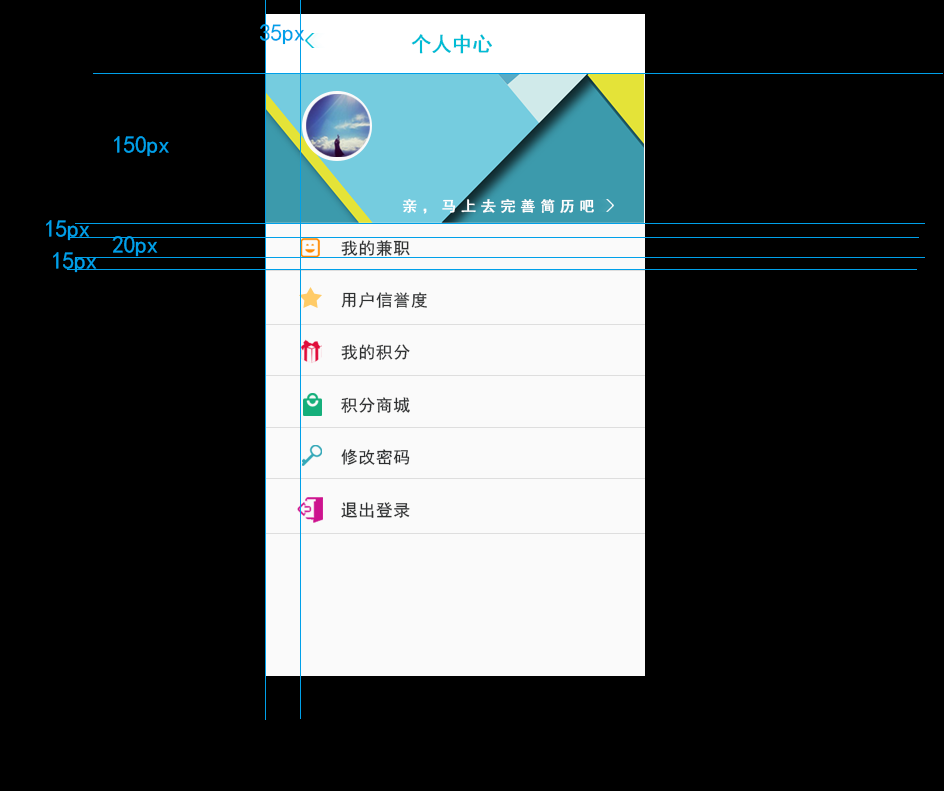
<style>
.page{position:relative;width:944px;height:791px;background:#000000}
.page>*{position:absolute;margin:0}
.t1{font:24px "SimHei";letter-spacing:-0.02em;color:#00a0e9}
.t2{font:20.2px "SimHei";letter-spacing:-0.02em;color:#00bcd4;font-weight:bold}
.t3{font:14.6px "SimHei";letter-spacing:0.32em;color:#ffffff;font-weight:bold}
.t4{font:16.9px "SimHei";letter-spacing:0.04em;color:#2e3031}
</style>
<div class="page">
<p class="t1" style="left:260px;top:24px;width:45px;height:21px">35px</p>
<p class="t2" style="left:411px;top:34px;width:81px;height:20px">个人中心</p>
<p class="t1" style="left:114px;top:136px;width:55px;height:21px">150px</p>
<p class="t3" style="left:402px;top:199px;width:192px;height:15px">亲，马上去完善简历吧</p>
<p class="t1" style="left:46px;top:220px;width:44px;height:21px">15px</p>
<p class="t1" style="left:112px;top:236px;width:46px;height:21px">20px</p>
<p class="t4" style="left:341px;top:240px;width:69px;height:16px">我的兼职</p>
<p class="t1" style="left:53px;top:252px;width:44px;height:21px">15px</p>
<p class="t4" style="left:341px;top:292px;width:86px;height:16px">用户信誉度</p>
<p class="t4" style="left:341px;top:344px;width:69px;height:16px">我的积分</p>
<p class="t4" style="left:341px;top:397px;width:69px;height:16px">积分商城</p>
<p class="t4" style="left:341px;top:449px;width:69px;height:16px">修改密码</p>
<p class="t4" style="left:341px;top:502px;width:69px;height:16px">退出登录</p>
</div>
